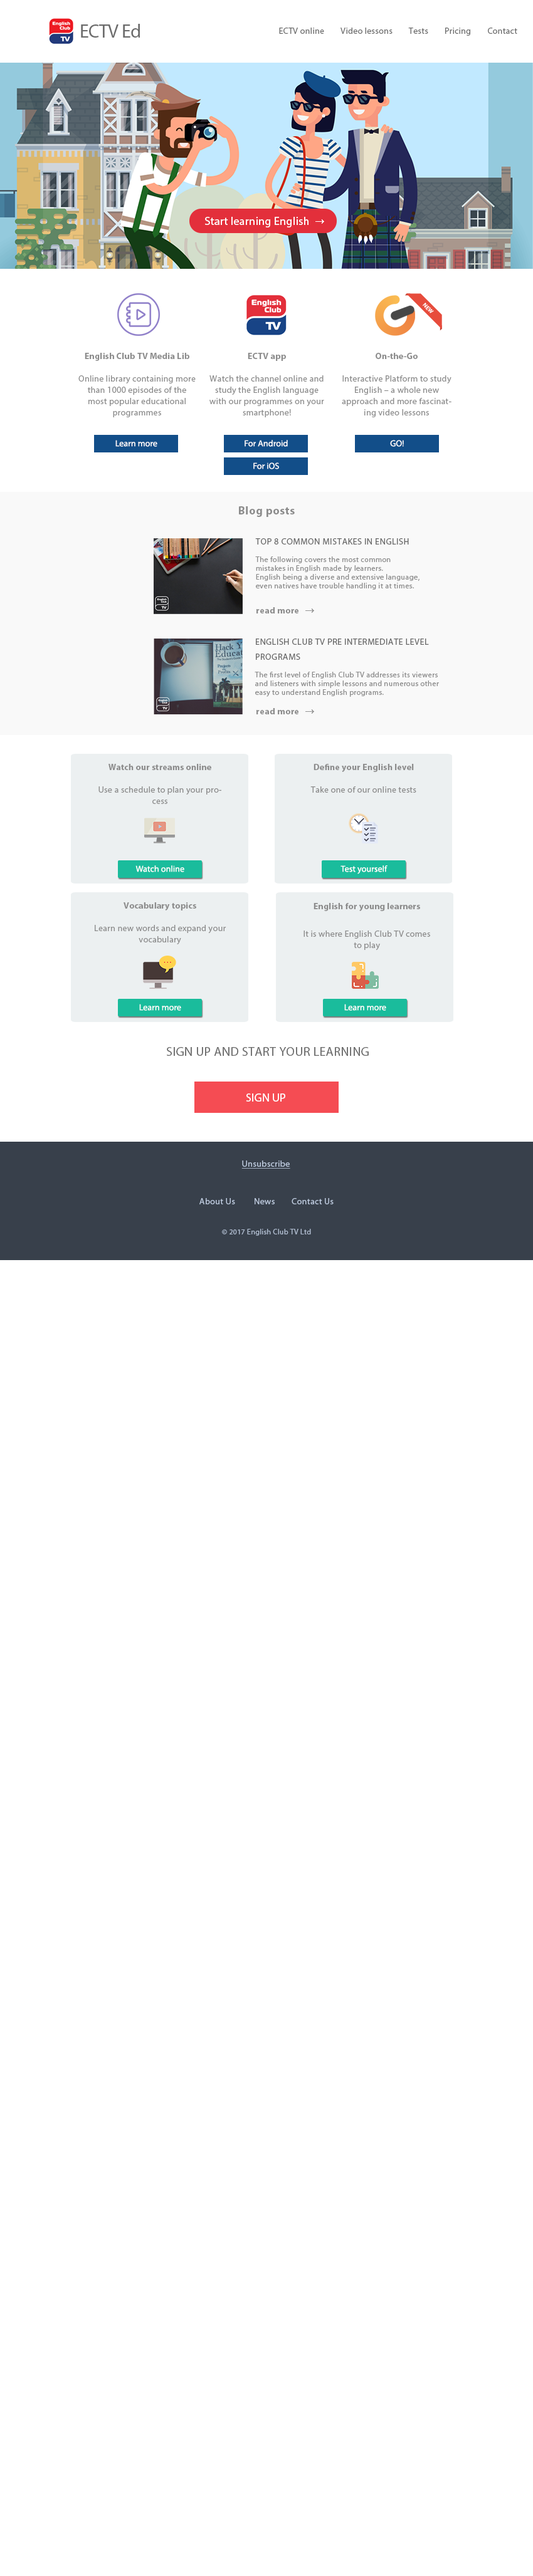
<style>
.page{position:relative;width:533px;height:2576px;background:#ffffff}
.page>*{position:absolute;margin:0}
.t1{font:18.8px "MyriadPro-Regular";letter-spacing:-0.02em;color:#6c6c6c}
.t2{font:8.8px "MyriadPro-Regular";letter-spacing:0.02em;color:#6c6c6c}
.t3{font:11.3px "MyriadPro-Regular";letter-spacing:0.02em;color:#ffffff}
.t4{font:5.9px "MyriadPro-Bold";color:#ffffff;text-transform:uppercase}
.t5{font:8.8px/11.3px "MyriadPro-Regular";letter-spacing:0.02em;color:#8c8c8c}
.t6{font:8.8px/11.3px "MyriadPro-Bold";letter-spacing:0.02em;color:#8c8c8c}
.t7{font:8.8px "MyriadPro-Regular";color:#ffffff}
.t8{font:11.3px "MyriadPro-Bold";letter-spacing:0.04em;color:#8c8c8c}
.t9{font:7.5px/8.8px "MyriadPro-Regular";letter-spacing:0.04em;color:#8c8c8c}
.t10{font:8.8px/15px "MyriadPro-Regular";letter-spacing:0.04em;color:#686868;text-transform:uppercase}
.t11{font:8.8px "MyriadPro-Bold";letter-spacing:0.04em;color:#8c8c8c}
.t12{font:8.8px/16.3px "MyriadPro-Bold";letter-spacing:0.02em;color:#8c8c8c}
.t13{font:12.5px "MyriadPro-Regular";letter-spacing:0.02em;color:#686868;text-transform:uppercase}
.t14{font:11.3px "MyriadPro-Regular";letter-spacing:0.02em;color:#ffffff;text-transform:uppercase}
.t15{font:8.8px "MyriadPro-Regular";letter-spacing:0.026em;color:#bcc9dd;text-decoration:underline}
.t16{font:8.8px "MyriadPro-Regular";letter-spacing:0.026em;color:#bcc9dd}
.t17{font:7.5px "MyriadPro-Regular";letter-spacing:0.026em;color:#aebbce}
</style>
<div class="page">
<p class="t1" style="left:81px;top:24px;width:59px;height:14px">ECTV Ed</p>
<p class="t2" style="left:279px;top:28px;width:238px;height:8px">ECTV online        Video lessons        Tests        Pricing        Contact</p>
<p class="t3" style="left:205px;top:217px;width:103px;height:10px">Start learning English</p>
<p class="t4" style="left:422px;top:303px;width:12px;height:10px;rotate:45deg">NEW</p>
<p class="t5" style="left:78px;top:353px;width:118px;height:64px;text-align:center"><span class="t6">English Club TV Media Lib<br></span><br>Online library containing more than 1000 episodes of the most popular educational programmes</p>
<p class="t5" style="left:209px;top:353px;width:115px;height:64px;text-align:center"><span class="t6">ECTV app<br></span><br>Watch the channel online and study the English language with our programmes on your smartphone!</p>
<p class="t5" style="left:342px;top:353px;width:109px;height:64px;text-align:center"><span class="t6">On-the-Go<br></span><br>Interactive Platform to study English – a whole new approach and more fascinating video lessons</p>
<p class="t7" style="left:115px;top:440px;width:42px;height:7px">Learn more</p>
<p class="t7" style="left:244px;top:440px;width:44px;height:7px">For Android</p>
<p class="t7" style="left:390px;top:440px;width:14px;height:7px">GO!</p>
<p class="t7" style="left:253px;top:462px;width:26px;height:7px">For iOS</p>
<p class="t8" style="left:239px;top:506px;width:56px;height:11px">Blog posts</p>
<p class="t9" style="left:255px;top:538px;width:164px;height:52px"><span class="t10">Top 8 Common Mistakes in English<br><br></span>The following covers the most common<br>mistakes in English made by learners.<br>English being a diverse and extensive language,<br>even natives have trouble handling it at times.</p>
<p class="t11" style="left:256px;top:607px;width:42px;height:6px">read more</p>
<p class="t9" style="left:254px;top:639px;width:185px;height:58px"><span class="t10">English Club TV Pre intermediate level<br>programs<br></span><br>The first level of English Club TV addresses its viewers<br>and listeners with simple lessons and numerous other<br>easy to understand English programs.</p>
<p class="t11" style="left:256px;top:708px;width:42px;height:6px">read more</p>
<p class="t5" style="left:98px;top:764px;width:123px;height:40px;text-align:center"><span class="t12">Watch our streams online<br></span><br>Use a schedule to plan your process</p>
<p class="t5" style="left:310px;top:764px;width:106px;height:29px;text-align:center"><span class="t12">Define your English level<br></span><br>Take one of our online tests</p>
<p class="t7" style="left:135px;top:865px;width:49px;height:7px">Watch online</p>
<p class="t7" style="left:340px;top:865px;width:47px;height:9px">Test yourself</p>
<p class="t5" style="left:95px;top:902px;width:131px;height:42px;text-align:center"><span class="t12">Vocabulary topics <br></span><br>Learn new words and expand your vocabulary</p>
<p class="t5" style="left:303px;top:903px;width:127px;height:48px;text-align:center"><span class="t12">English for young learners<br><br></span>It is where English Club TV comes to play</p>
<p class="t7" style="left:139px;top:1004px;width:42px;height:7px">Learn more</p>
<p class="t7" style="left:344px;top:1004px;width:42px;height:7px">Learn more</p>
<p class="t13" style="left:167px;top:1047px;width:201px;height:9px">sign up and start your learning</p>
<p class="t14" style="left:246px;top:1093px;width:39px;height:9px">sign up</p>
<p class="t15" style="left:241px;top:1160px;width:49px;height:9px">Unsubscribe</p>
<p class="t16" style="left:199px;top:1198px;width:134px;height:6px">About Us         News        Contact Us</p>
<p class="t17" style="left:222px;top:1229px;width:89px;height:7px">© 2017 English Club TV Ltd</p>
</div>
